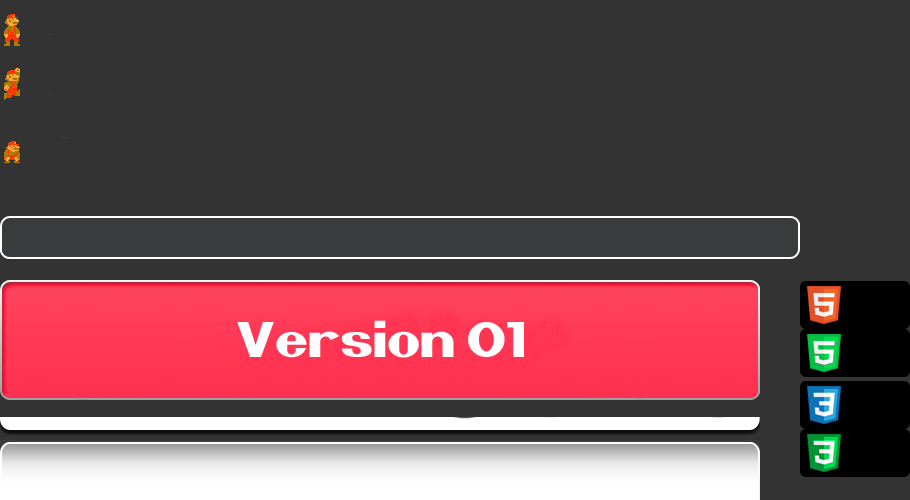
<style>
.page{position:relative;width:910px;height:500px;background:#333333}
.page>*{position:absolute;margin:0}
.t1{font:50px "Nintender";color:#ffffff}
</style>
<div class="page">
<p class="t1" style="left:237px;top:320px;width:287px;height:38px">Version 01</p>
</div>
